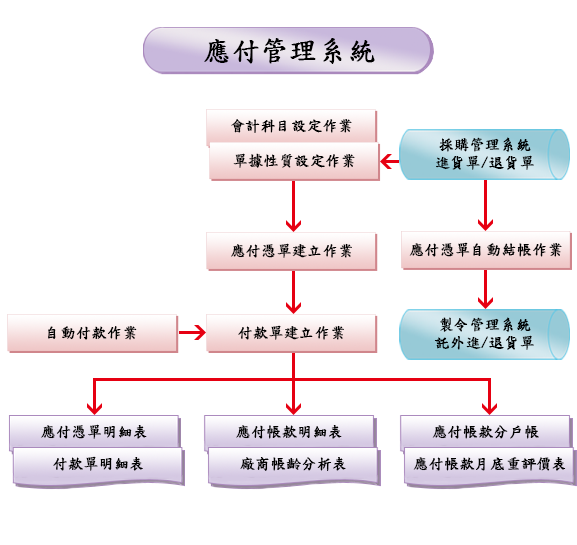
<style>
.page{position:relative;width:577px;height:545px;background:#ffffff}
.page>*{position:absolute;margin:0}
.t1{font:28px "DFKaiShu-SB-Estd-BF";color:#000000;font-weight:bold}
.t2{font:15px "DFKaiShu-SB-Estd-BF";color:#000000;font-weight:bold}
.t3{font:15px/18px "DFKaiShu-SB-Estd-BF";color:#000000;font-weight:bold}
</style>
<div class="page">
<p class="t1" style="left:204px;top:38px;width:171px;height:26px">應付管理系統</p>
<p class="t2" style="left:231px;top:119px;width:121px;height:14px">會計科目設定作業</p>
<p class="t3" style="left:436px;top:137px;width:98px;height:33px;text-align:center">採購管理系統<br>進貨單/退貨單</p>
<p class="t2" style="left:233px;top:153px;width:122px;height:15px">單據性質設定作業</p>
<p class="t2" style="left:231px;top:243px;width:121px;height:15px">應付憑單建立作業</p>
<p class="t2" style="left:409px;top:242px;width:153px;height:15px">應付憑單自動結帳作業</p>
<p class="t3" style="left:434px;top:317px;width:100px;height:33px;text-align:center">製令管理系統<br>託外進/退貨單</p>
<p class="t2" style="left:48px;top:325px;width:89px;height:15px">自動付款作業</p>
<p class="t2" style="left:238px;top:325px;width:106px;height:15px">付款單建立作業</p>
<p class="t2" style="left:41px;top:424px;width:106px;height:15px">應付憑單明細表</p>
<p class="t2" style="left:236px;top:425px;width:106px;height:14px">應付帳款明細表</p>
<p class="t2" style="left:432px;top:425px;width:107px;height:14px">應付帳款分戶帳</p>
<p class="t2" style="left:53px;top:456px;width:90px;height:15px">付款單明細表</p>
<p class="t2" style="left:240px;top:457px;width:106px;height:14px">廠商帳齡分析表</p>
<p class="t2" style="left:413px;top:457px;width:153px;height:14px">應付帳款月底重評價表</p>
</div>
